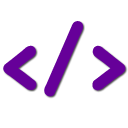
<style>
.page{position:relative;width:128px;height:128px;background:#ffffff}
.page>*{position:absolute;margin:0}
.t1{font:83.3px "Chalkboard-Bold";color:#660099}
</style>
<div class="page">
<p class="t1" style="left:3px;top:21px;width:123px;height:76px">&lt;/&gt;</p>
</div>
